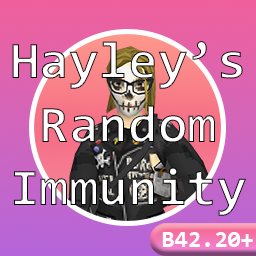
<style>
.page{position:relative;width:256px;height:256px}
.page>*{position:absolute;margin:0}
.t1{font:52.8px "Consolas-Bold"}
.t2{font:24px "Consolas-Bold";color:#ffffff}
</style>
<div class="page">
<p class="t1" style="left:12px;top:41px;width:234px;height:175px;text-align:center">Hayley’s<br>Random<br>Immunity</p>
<p class="t2" style="left:162px;top:232px;width:91px;height:15px">B42.20+</p>
</div>
